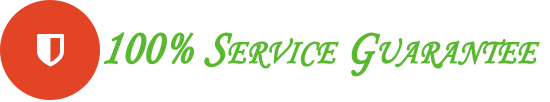
<style>
.page{position:relative;width:550px;height:102px;background:#ffffff}
.page>*{position:absolute;margin:0}
.t1{font:50px "MonotypeCorsiva";color:#58b830;font-variant:small-caps;font-weight:bold;font-style:italic;scale:0.88 1}
</style>
<div class="page">
<p class="t1" style="left:103px;top:32px;width:437px;height:45px">100% Service Guarantee</p>
</div>
